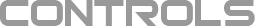
<style>
.page{position:relative;width:255px;height:26px;background:#999999}
.page>*{position:absolute;margin:0}
.t1{font:50px "Bitsumishi";color:#999999}
</style>
<div class="page">
<p class="t1" style="left:0px;top:0px;width:255px;height:26px">Controls</p>
</div>
